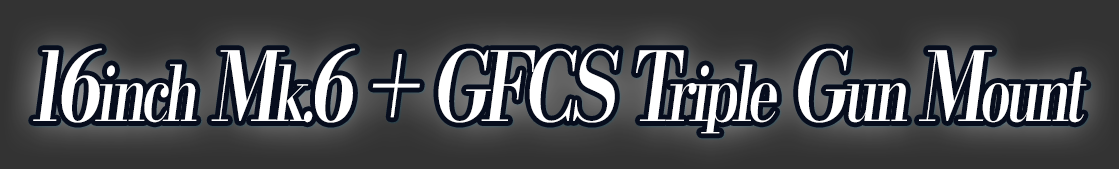
<style>
.page{position:relative;width:1119px;height:169px;background:#333333}
.page>*{position:absolute;margin:0}
.t1{font:96px "KochoStd-Heavy";letter-spacing:-0.08em;color:#ffffff;font-style:italic;scale:0.73 1}
.t2{font:76.8px "KochoStd-Heavy";letter-spacing:-0.08em;color:#ffffff;font-style:italic;scale:0.73 1}
</style>
<div class="page">
<p class="t1" style="left:33px;top:48px;width:1054px;height:86px">16<span class="t2">inch</span> M<span class="t2">k.</span>6 + GFCS T<span class="t2">riple</span> G<span class="t2">un </span>M<span class="t2">ount</span></p>
</div>
